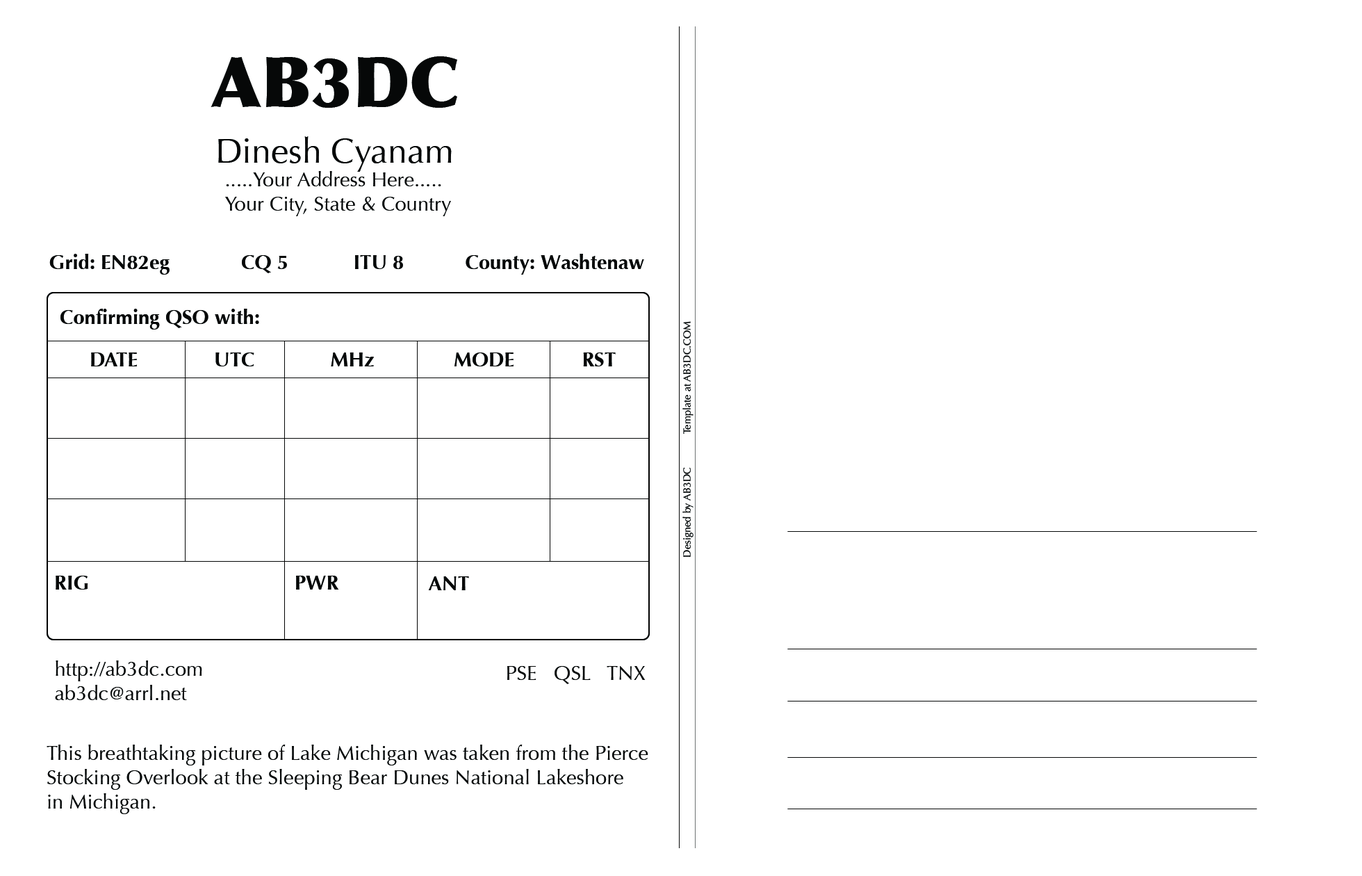
<style>
.page{position:relative;width:1362px;height:876px;background:#ffffff}
.page>*{position:absolute;margin:0}
.t1{font:69.5px "Optima-ExtraBlack";color:#060808}
.t2{font:34.7px "Optima-Regular";color:#060808}
.t3{font:20.3px "Optima-Regular";color:#060808}
.t4{font:20.3px "Optima-Bold";color:#060808}
.t5{font:10.1px "Optima-Regular";color:#060808}
</style>
<div class="page">
<p class="t1" style="left:211px;top:56px;width:246px;height:52px">AB3DC</p>
<p class="t2" style="left:218px;top:136px;width:234px;height:36px">Dinesh Cyanam</p>
<p class="t3" style="left:225px;top:171px;width:226px;height:45px">.....Your Address Here.....<br>Your City, State &amp; Country</p>
<p class="t4" style="left:49px;top:254px;width:121px;height:20px">Grid: EN82eg</p>
<p class="t4" style="left:242px;top:255px;width:45px;height:18px">CQ 5</p>
<p class="t4" style="left:355px;top:255px;width:48px;height:14px">ITU 8</p>
<p class="t4" style="left:466px;top:254px;width:178px;height:20px">County: Washtenaw</p>
<p class="t4" style="left:60px;top:309px;width:199px;height:20px">Confirming QSO with:</p>
<p class="t5" style="left:682px;top:321px;width:11px;height:236px;rotate:-90deg">Designed by AB3DC            Template at AB3DC.COM</p>
<p class="t4" style="left:91px;top:352px;width:46px;height:14px">DATE</p>
<p class="t4" style="left:215px;top:352px;width:39px;height:14px">UTC</p>
<p class="t4" style="left:331px;top:352px;width:43px;height:14px">MHz</p>
<p class="t4" style="left:454px;top:352px;width:60px;height:14px">MODE</p>
<p class="t4" style="left:583px;top:352px;width:33px;height:14px">RST</p>
<p class="t4" style="left:56px;top:575px;width:32px;height:14px">RIG</p>
<p class="t4" style="left:296px;top:575px;width:43px;height:14px">PWR</p>
<p class="t4" style="left:428px;top:576px;width:41px;height:14px">ANT</p>
<p class="t3" style="left:55px;top:660px;width:147px;height:40px">http://ab3dc.com<br>ab3dc@arrl.net</p>
<p class="t3" style="left:507px;top:666px;width:139px;height:18px">PSE   QSL   TNX</p>
<p class="t3" style="left:47px;top:744px;width:601px;height:70px">This breathtaking picture of Lake Michigan was taken from the Pierce <br>Stocking Overlook at the Sleeping Bear Dunes National Lakeshore <br>in Michigan.</p>
</div>
